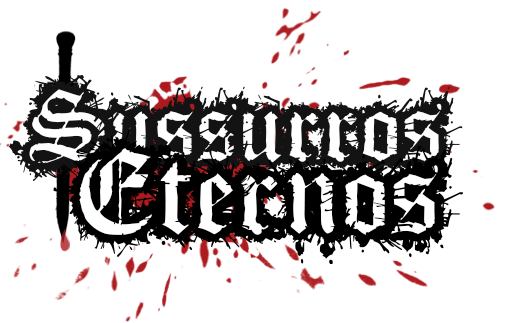
<style>
.page{position:relative;width:506px;height:323px;background:#ffffff}
.page>*{position:absolute;margin:0}
.t1{font:150px "FleshWound";color:#131313}
.t2{font:180px "FleshWound";color:#000000}
</style>
<div class="page">
<p class="t1" style="left:9px;top:74px;width:454px;height:108px">Sussurros</p>
<p class="t2" style="left:53px;top:130px;width:411px;height:134px">Eternos</p>
</div>
